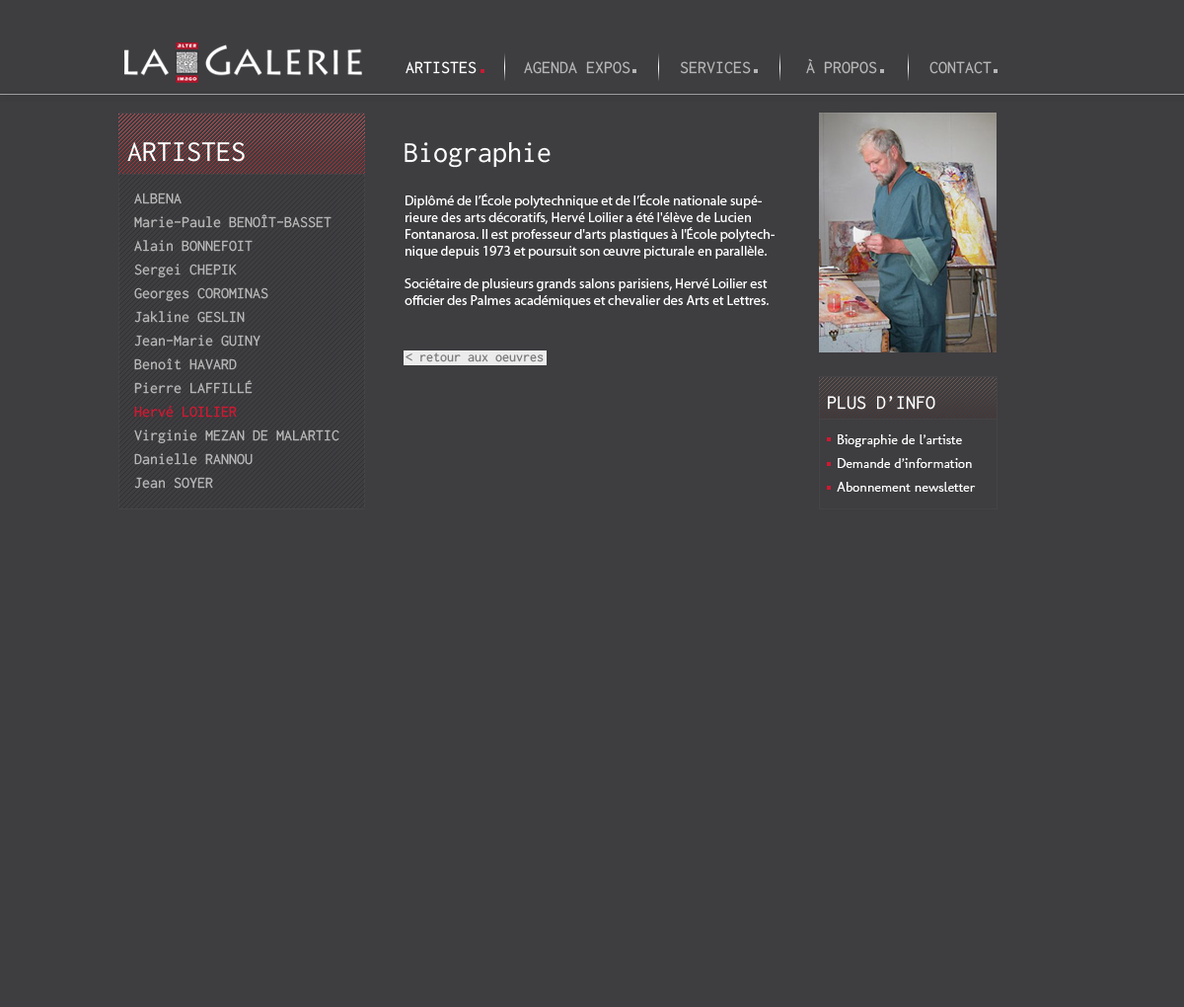
<style>
.page{position:relative;width:1184px;height:1007px;background:#3e3d40}
.page>*{position:absolute;margin:0}
.t1{font:17.8px "Inconsolata";color:#ffffff}
.t2{font:17.8px "Inconsolata";color:#b5b5b5}
.t3{font:29.6px "Inconsolata";color:#ffffff}
.t4{font:15.8px/23.7px "Inconsolata";color:#b5b5b5}
.t5{font:15.8px/23.7px "Inconsolata";color:#ce1932}
.t6{font:13.8px "MyriadPro-Regular";color:#ffffff}
.t7{font:13.8px "Inconsolata";color:#7c7c7c}
.t8{font:19.7px "Inconsolata";color:#ffffff}
.t9{font:13.8px/23.7px "Molengo";color:#ffffff}
</style>
<div class="page">
<p class="t1" style="left:406px;top:61px;width:71px;height:13px">ARTISTES</p>
<p class="t2" style="left:524px;top:61px;width:107px;height:13px">AGENDA EXPOS</p>
<p class="t2" style="left:680px;top:61px;width:71px;height:13px">SERVICES</p>
<p class="t2" style="left:806px;top:58px;width:71px;height:16px">À PROPOS</p>
<p class="t2" style="left:930px;top:61px;width:62px;height:13px">CONTACT</p>
<p class="t3" style="left:127px;top:142px;width:118px;height:20px">ARTISTES</p>
<p class="t3" style="left:405px;top:142px;width:146px;height:26px">Biographie</p>
<p class="t4" style="left:134px;top:192px;width:206px;height:297px">ALBENA<br>Marie-Paule BENOÎT-BASSET<br>Alain BONNEFOIT<br>Sergei CHEPIK<br>Georges COROMINAS<br>Jakline GESLIN<br>Jean-Marie GUINY<br>Benoît HAVARD<br>Pierre LAFFILLÉ<br><span class="t5">Hervé LOILIER<br></span>Virginie MEZAN DE MALARTIC<br>Danielle RANNOU<br>Jean SOYER</p>
<p class="t6" style="left:405px;top:193px;width:370px;height:115px">Diplômé de l’École polytechnique et de l’École nationale supérieure des arts décoratifs, Hervé Loilier a été l'élève de Lucien Fontanarosa. Il est professeur d'arts plastiques à l'École polytechnique depuis 1973 et poursuit son œuvre picturale en parallèle.<br><br>Sociétaire de plusieurs grands salons parisiens, Hervé Loilier est officier des Palmes académiques et chevalier des Arts et Lettres.</p>
<p class="t7" style="left:406px;top:352px;width:138px;height:10px">&lt; retour aux oeuvres</p>
<p class="t8" style="left:828px;top:396px;width:108px;height:14px">PLUS D’INFO</p>
<p class="t9" style="left:837px;top:434px;width:139px;height:58px">Biographie de l’artiste<br>Demande d’information<br>Abonnement newsletter</p>
</div>
